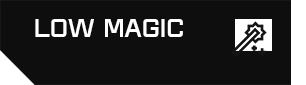
<style>
.page{position:relative;width:306px;height:85px;background:#0e0e0e}
.page>*{position:absolute;margin:0}
.t1{font:24.8px "Aguda-Regular3";letter-spacing:0.02em;color:#ffffff}
</style>
<div class="page">
<p class="t1" style="left:35px;top:19px;width:148px;height:18px">LOW MAGIC</p>
</div>
